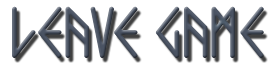
<style>
.page{position:relative;width:280px;height:64px;background:#ffffff}
.page>*{position:absolute;margin:0}
.t1{font:64px "ComicRunes";color:#4a5363}
</style>
<div class="page">
<p class="t1" style="left:12px;top:6px;width:252px;height:52px">LEAVE GAME</p>
</div>
